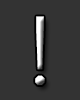
<style>
.page{position:relative;width:80px;height:100px;background:#333333}
.page>*{position:absolute;margin:0}
.t1{font:98px "ChakraPetch-Regular"}
</style>
<div class="page">
<p class="t1" style="left:35px;top:16px;width:10px;height:69px">!</p>
</div>
